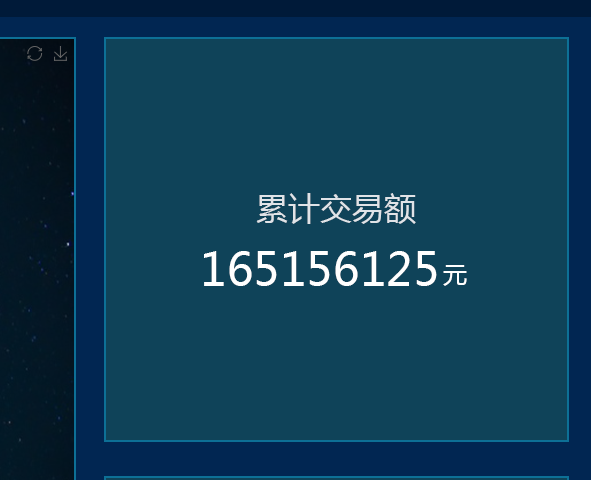
<style>
.page{position:relative;width:591px;height:480px;background:#0f4359}
.page>*{position:absolute;margin:0}
.t1{font:32px "MicrosoftYaHei";color:#e0e3e7}
.t2{font:45.3px "MicrosoftYaHei";color:#ffffff}
.t3{font:24px "MicrosoftYaHei";color:#ffffff}
</style>
<div class="page">
<p class="t1" style="left:256px;top:193px;width:160px;height:31px">累计交易额</p>
<p class="t2" style="left:204px;top:251px;width:233px;height:35px">165156125</p>
<p class="t3" style="left:443px;top:265px;width:24px;height:21px">元</p>
</div>
